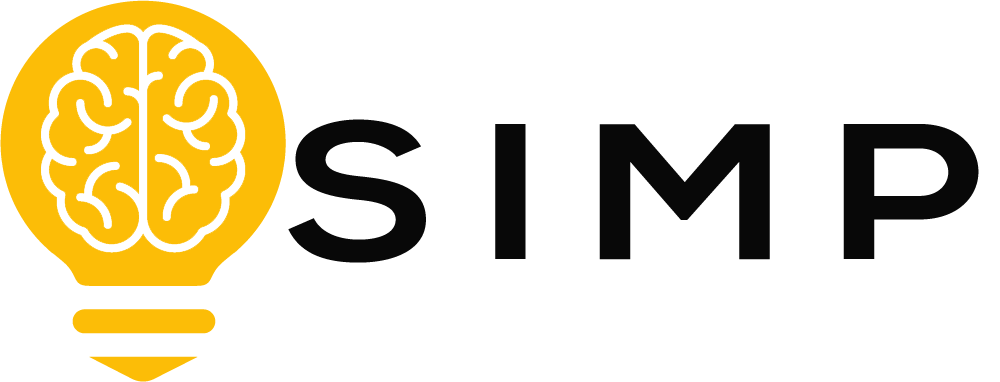
<style>
.page{position:relative;width:1000px;height:382px;background:#ffffff}
.page>*{position:absolute;margin:0}
.t1{font:192.5px "NexaBold";letter-spacing:0.2em;color:#080808;scale:1.19 1}
</style>
<div class="page">
<p class="t1" style="left:288px;top:119px;width:691px;height:144px">SIMP</p>
</div>
